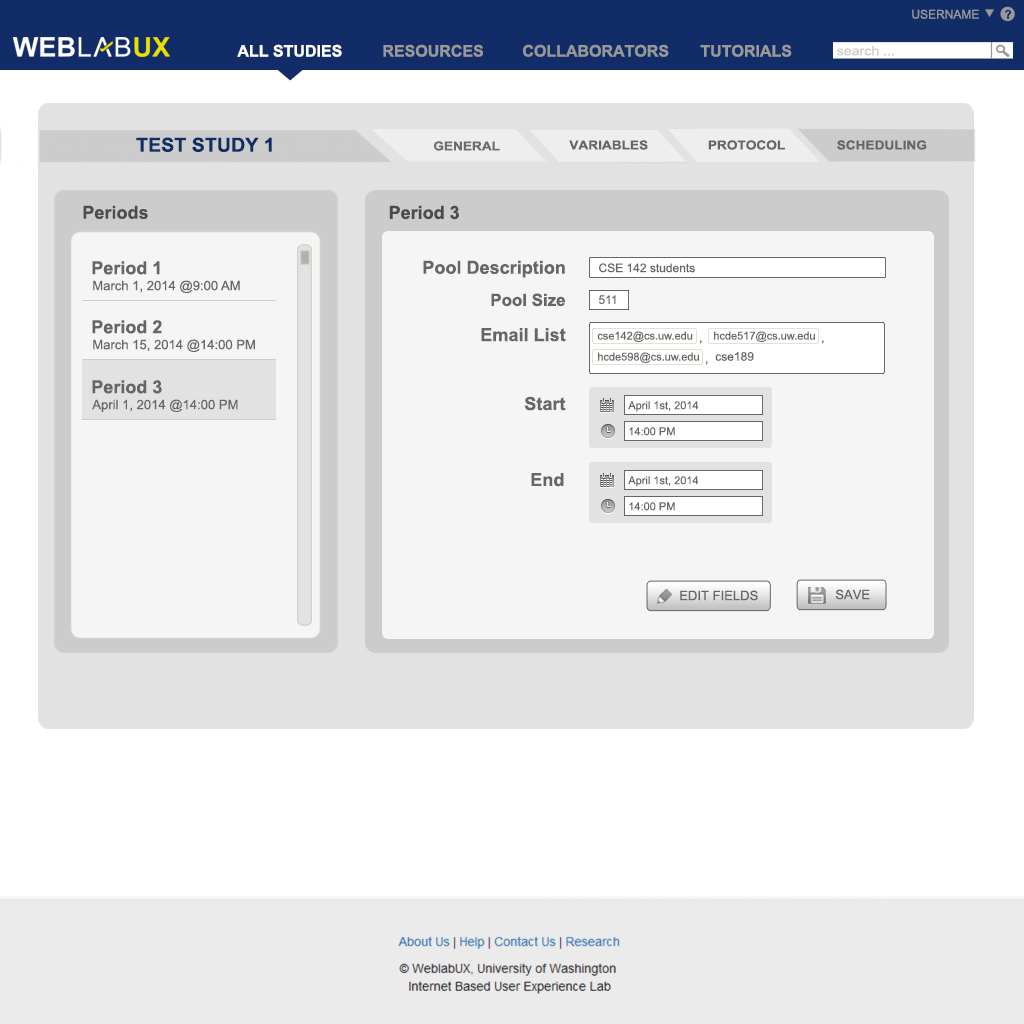
<style>
.page{position:relative;width:1024px;height:1024px;background:#ffffff}
.page>*{position:absolute;margin:0}
.t1{font:12px "ArialMT";color:#999999}
.t2{font:12px "Arial-BoldMT";color:#122c67}
.t3{font:16px "Arial-BoldMT";color:#ffffff}
.t4{font:16px "Arial-BoldMT";color:#999999}
.t5{font:16px "Arial-BoldMT";color:#989898}
.t6{font:12.9px "ArialMT";color:#cccccc;scale:1.1 1}
.t7{font:19.2px "Arial-BoldMT";color:#122c67}
.t8{font:12.4px "Arial-BoldMT";color:#6d6d6d;scale:1.1 1}
.t9{font:12.4px "Arial-BoldMT";color:#666666;scale:1.1 1}
.t10{font:18px "Arial-BoldMT";color:#4d4d4d}
.t11{font:18px "Arial-BoldMT";color:#4c4c4c}
.t12{font:18px "Arial-BoldMT";color:#666666}
.t13{font:12px "ArialMT";color:#666666}
.t14{font:13.1px "ArialMT";color:#666666}
.t15{font:16.9px "Arial-BoldMT";color:#666666}
.t16{font:11px "ArialMT";color:#666666}
</style>
<div class="page">
<p class="t1" style="left:912px;top:9px;width:67px;height:10px">USERNAME</p>
<p class="t2" style="left:1004px;top:9px;width:8px;height:10px">?</p>
<p class="t3" style="left:237px;top:44px;width:105px;height:13px">ALL STUDIES</p>
<p class="t4" style="left:383px;top:44px;width:100px;height:13px">RESOURCES</p>
<p class="t5" style="left:523px;top:44px;width:146px;height:13px">COLLABORATORS</p>
<p class="t4" style="left:700px;top:44px;width:92px;height:13px">TUTORIALS</p>
<p class="t6" style="left:837px;top:46px;width:57px;height:10px">search ...</p>
<p class="t7" style="left:136px;top:137px;width:136px;height:15px">TEST STUDY 1</p>
<p class="t8" style="left:433px;top:141px;width:67px;height:10px">GENERAL</p>
<p class="t9" style="left:569px;top:140px;width:79px;height:10px">VARIABLES</p>
<p class="t9" style="left:708px;top:140px;width:77px;height:10px">PROTOCOL</p>
<p class="t9" style="left:837px;top:140px;width:90px;height:10px">SCHEDULING</p>
<p class="t10" style="left:83px;top:205px;width:65px;height:14px">Periods</p>
<p class="t11" style="left:389px;top:205px;width:70px;height:15px">Period 3</p>
<p class="t12" style="left:92px;top:261px;width:68px;height:14px">Period 1</p>
<p class="t12" style="left:423px;top:260px;width:142px;height:18px">Pool Description</p>
<p class="t13" style="left:599px;top:263px;width:96px;height:10px">CSE 142 students</p>
<p class="t14" style="left:93px;top:280px;width:147px;height:13px">March 1, 2014 @9:00 AM</p>
<p class="t15" style="left:491px;top:293px;width:74px;height:14px">Pool Size</p>
<p class="t13" style="left:599px;top:295px;width:17px;height:10px">511</p>
<p class="t12" style="left:92px;top:320px;width:70px;height:14px">Period 2</p>
<p class="t12" style="left:481px;top:328px;width:85px;height:14px">Email List</p>
<p class="t14" style="left:93px;top:339px;width:162px;height:13px">March 15, 2014 @14:00 PM</p>
<p class="t16" style="left:597px;top:331px;width:96px;height:11px">cse142@cs.uw.edu</p>
<p class="t13" style="left:700px;top:340px;width:2px;height:4px">,</p>
<p class="t16" style="left:714px;top:331px;width:101px;height:11px">hcde517@cs.uw.edu</p>
<p class="t13" style="left:822px;top:340px;width:2px;height:4px">,</p>
<p class="t16" style="left:598px;top:352px;width:101px;height:11px">hcde598@cs.uw.edu</p>
<p class="t13" style="left:715px;top:352px;width:39px;height:9px">cse189</p>
<p class="t13" style="left:706px;top:361px;width:2px;height:4px">,</p>
<p class="t12" style="left:92px;top:380px;width:70px;height:14px">Period 3</p>
<p class="t14" style="left:92px;top:399px;width:146px;height:13px">April 1, 2014 @14:00 PM</p>
<p class="t12" style="left:524px;top:396px;width:42px;height:15px">Start</p>
<p class="t16" style="left:628px;top:401px;width:71px;height:11px">April 1st, 2014</p>
<p class="t16" style="left:629px;top:427px;width:46px;height:9px">14:00 PM</p>
<p class="t12" style="left:531px;top:473px;width:33px;height:14px">End</p>
<p class="t16" style="left:628px;top:476px;width:71px;height:11px">April 1st, 2014</p>
<p class="t16" style="left:629px;top:502px;width:46px;height:9px">14:00 PM</p>
<p class="t14" style="left:680px;top:590px;width:78px;height:11px">EDIT FIELDS</p>
<p class="t14" style="left:835px;top:589px;width:35px;height:11px">SAVE</p>
</div>
